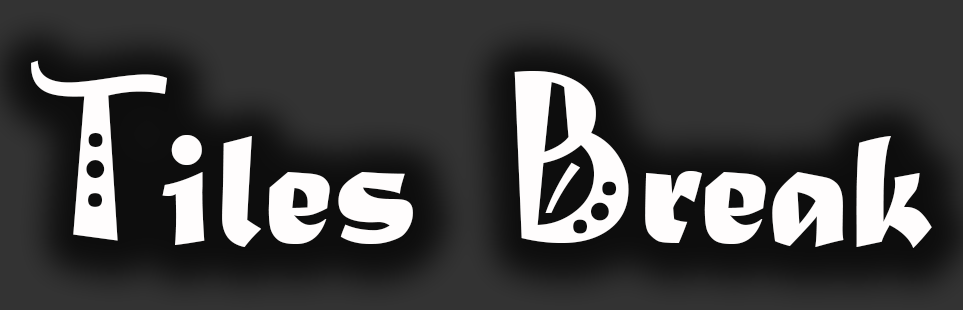
<style>
.page{position:relative;width:963px;height:310px;background:#333333}
.page>*{position:absolute;margin:0}
.t1{font:166.7px "MaturaMTScriptCapitals";color:#fffdfd}
.t2{font:200px "Jokerman-Regular";color:#fffdfd}
</style>
<div class="page">
<p class="t1" style="left:31px;top:60px;width:901px;height:188px"><span class="t2">T</span>iles  <span class="t2">B</span>reak</p>
</div>
